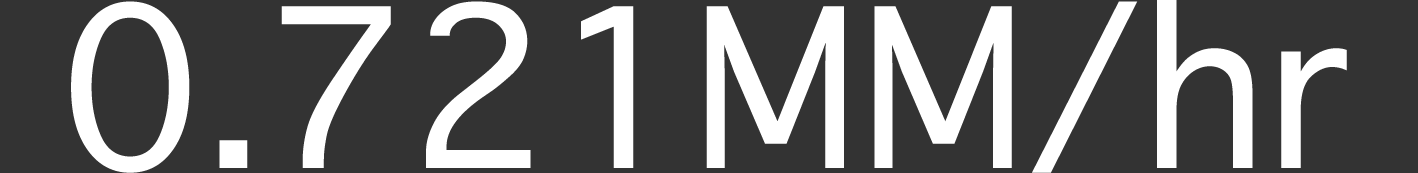
<style>
.page{position:relative;width:1418px;height:173px;background:#333333}
.page>*{position:absolute;margin:0}
.t1{font:300px "AppleSymbols";color:#ffffff}
</style>
<div class="page">
<p class="t1" style="left:71px;top:0px;width:1276px;height:173px">0.721MM/hr</p>
</div>
